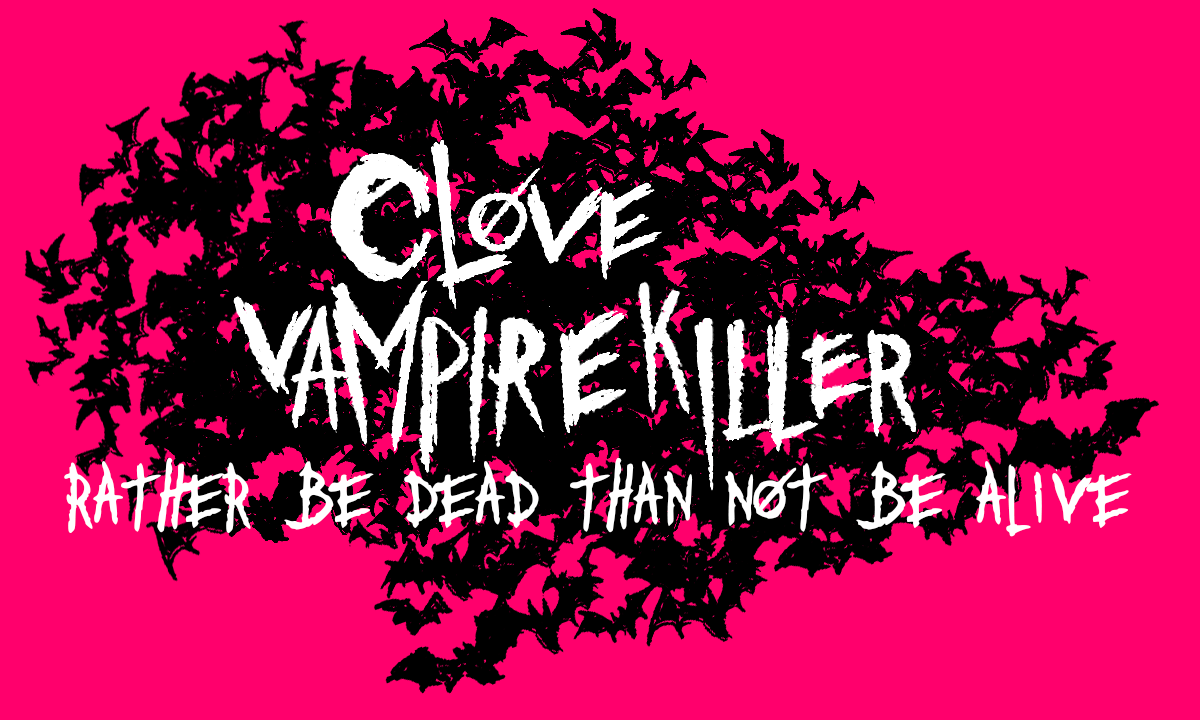
<style>
.page{position:relative;width:1200px;height:720px;background:#ff006c}
.page>*{position:absolute;margin:0}
.t1{font:110px "clove";color:#ffffff}
</style>
<div class="page">
<p class="t1" style="left:64px;top:457px;width:1068px;height:80px">rather be dead than not be alive</p>
</div>
